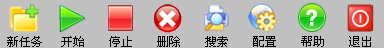
<style>
.page{position:relative;width:384px;height:48px;background:#c0c0c0}
.page>*{position:absolute;margin:0}
.t1{font:12px "SimSun";color:#030303}
</style>
<div class="page">
<p class="t1" style="left:7px;top:36px;width:364px;height:11px">新任务   开始    停止    删除    搜索    配置    帮助    退出</p>
</div>
